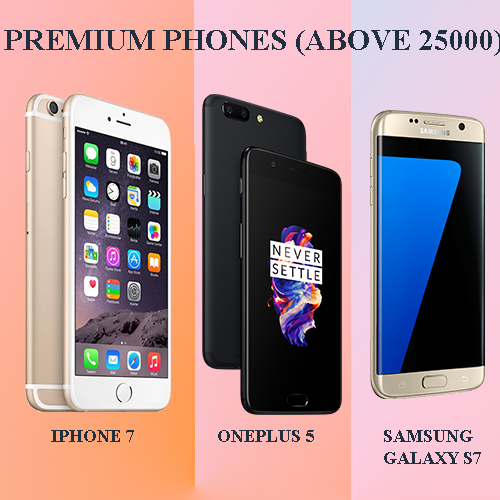
<style>
.page{position:relative;width:500px;height:500px}
.page>*{position:absolute;margin:0}
.t1{font:18px "TimesNewRomanPS-BoldMT";color:#203040}
</style>
<div class="page">
<p class="t1" style="left:51px;top:430px;width:83px;height:12px">IPHONE 7</p>
<p class="t1" style="left:218px;top:430px;width:96px;height:12px">ONEPLUS 5</p>
<p class="t1" style="left:384px;top:430px;width:97px;height:34px">SAMSUNG<br>GALAXY S7</p>
</div>
